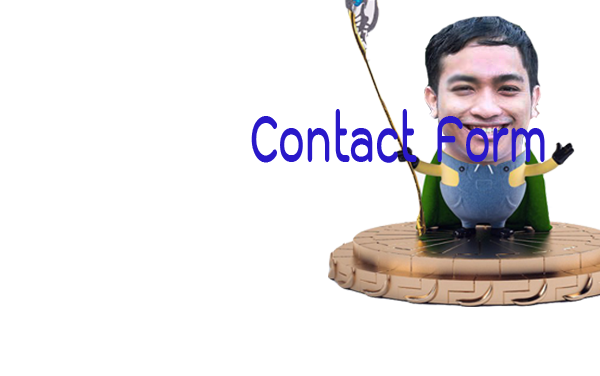
<style>
.page{position:relative;width:600px;height:376px;background:#ffffff}
.page>*{position:absolute;margin:0}
.t1{font:94.5px "THKodchasal-Bold";color:#2918c9;scale:0.64 1}
</style>
<div class="page">
<p class="t1" style="left:251px;top:109px;width:294px;height:54px">Contact Form</p>
</div>
